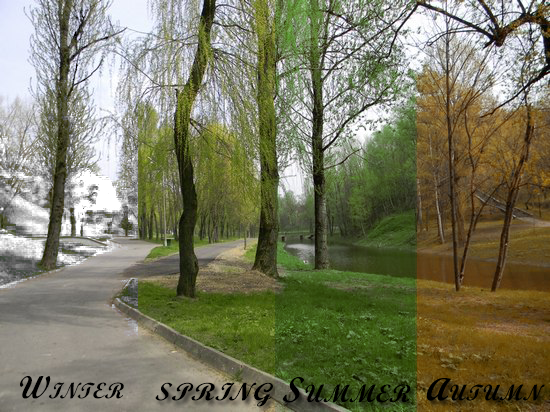
<style>
.page{position:relative;width:550px;height:412px}
.page>*{position:absolute;margin:0}
.t1{font:32px "ScriptMTBold";letter-spacing:0.03em;color:#000000;font-variant:small-caps;font-style:italic}
.t2{font:36px "ScriptMTBold";letter-spacing:0.03em;color:#000000;font-variant:small-caps;font-style:italic}
.t3{font:36px "ScriptMTBold";letter-spacing:0.03em;color:#000000;font-variant:small-caps;font-style:italic;scale:1.13 1}
</style>
<div class="page">
<p class="t1" style="left:20px;top:376px;width:104px;height:23px">Winter</p>
<p class="t2" style="left:282px;top:377px;width:129px;height:26px">Summer</p>
<p class="t3" style="left:155px;top:382px;width:118px;height:25px">spring</p>
</div>
